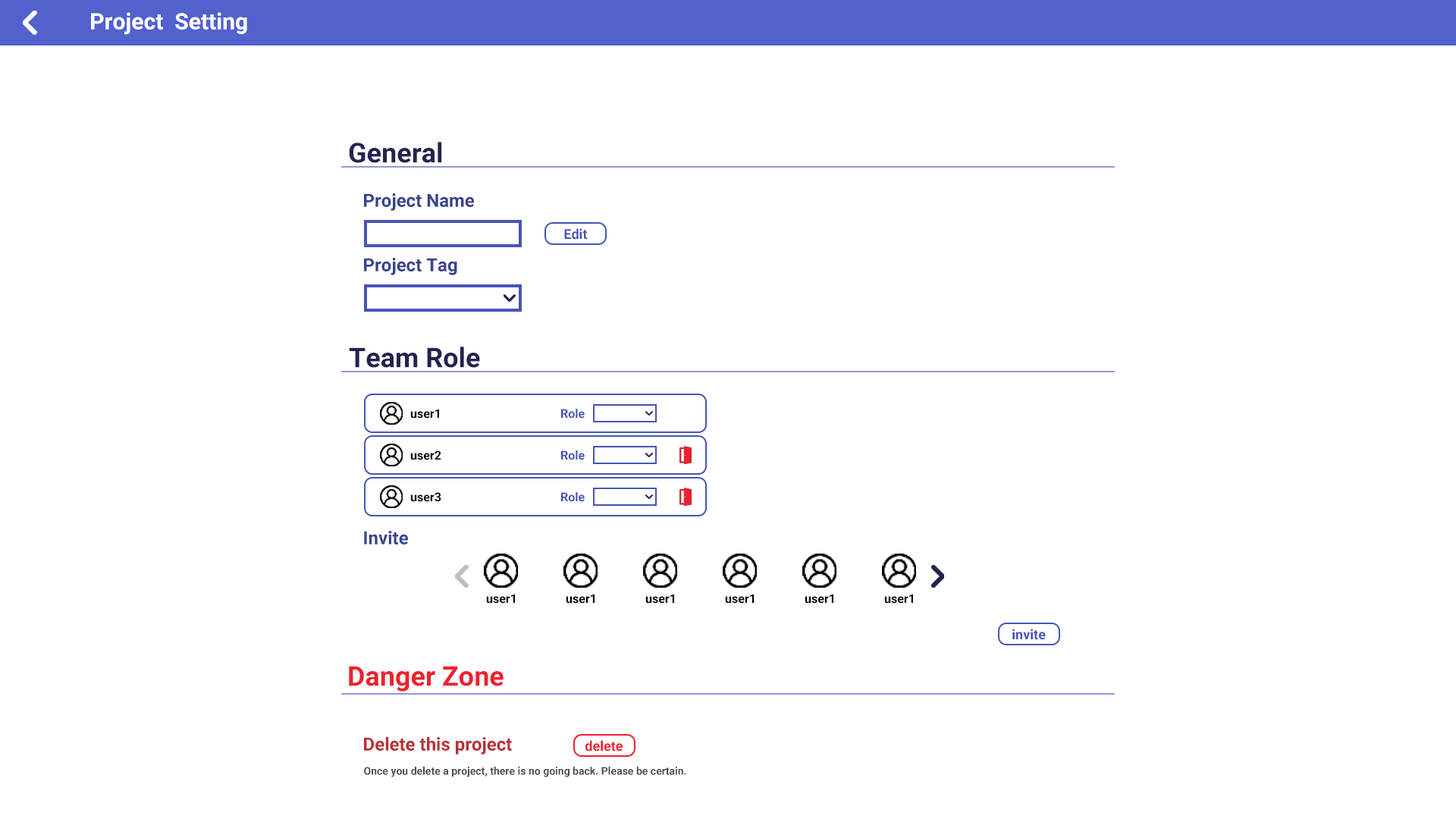
<style>
.page{position:relative;width:1456px;height:819px;background:#ffffff}
.page>*{position:absolute;margin:0}
.t1{font:22.7px "Roboto-Bold";color:#ffffff}
.t2{font:27.3px "Roboto-Bold";color:#1f254f}
.t3{font:18.2px "Roboto-Bold";color:#38438f}
.t4{font:13.6px "Roboto-Bold";color:#4755b5}
.t5{font:12.1px "Roboto-Bold";color:#000000}
.t6{font:12.1px "Roboto-Bold";color:#4755b5}
.t7{font:27.3px "Roboto-Bold";color:#ed2130}
.t8{font:18.2px "Roboto-Bold";color:#b92f36}
.t9{font:13.6px "Roboto-Bold";color:#ed2130}
.t10{font:10.6px "Roboto-Bold";color:#4d4d4d}
</style>
<div class="page">
<p class="t1" style="left:91px;top:12px;width:156px;height:23px">Project  Setting</p>
<p class="t2" style="left:349px;top:142px;width:93px;height:21px">General</p>
<p class="t3" style="left:364px;top:193px;width:110px;height:18px">Project Name</p>
<p class="t4" style="left:564px;top:228px;width:24px;height:12px">Edit</p>
<p class="t3" style="left:364px;top:258px;width:93px;height:17px">Project Tag</p>
<p class="t2" style="left:349px;top:347px;width:131px;height:21px">Team Role</p>
<p class="t5" style="left:410px;top:409px;width:29px;height:10px">user1</p>
<p class="t6" style="left:561px;top:409px;width:24px;height:10px">Role</p>
<p class="t5" style="left:410px;top:450px;width:31px;height:10px">user2</p>
<p class="t6" style="left:561px;top:450px;width:24px;height:10px">Role</p>
<p class="t5" style="left:410px;top:492px;width:31px;height:10px">user3</p>
<p class="t6" style="left:561px;top:492px;width:24px;height:10px">Role</p>
<p class="t3" style="left:364px;top:531px;width:44px;height:13px">Invite</p>
<p class="t5" style="left:486px;top:594px;width:29px;height:10px">user1</p>
<p class="t5" style="left:566px;top:594px;width:29px;height:10px">user1</p>
<p class="t5" style="left:645px;top:594px;width:29px;height:10px">user1</p>
<p class="t5" style="left:725px;top:594px;width:29px;height:10px">user1</p>
<p class="t5" style="left:805px;top:594px;width:28px;height:10px">user1</p>
<p class="t5" style="left:884px;top:594px;width:29px;height:10px">user1</p>
<p class="t4" style="left:1012px;top:629px;width:34px;height:11px">invite</p>
<p class="t7" style="left:349px;top:666px;width:155px;height:26px">Danger Zone</p>
<p class="t8" style="left:364px;top:736px;width:148px;height:19px">Delete this project</p>
<p class="t9" style="left:585px;top:740px;width:38px;height:11px">delete</p>
<p class="t10" style="left:364px;top:767px;width:322px;height:10px">Once you delete a project, there is no going back. Please be certain.</p>
</div>
